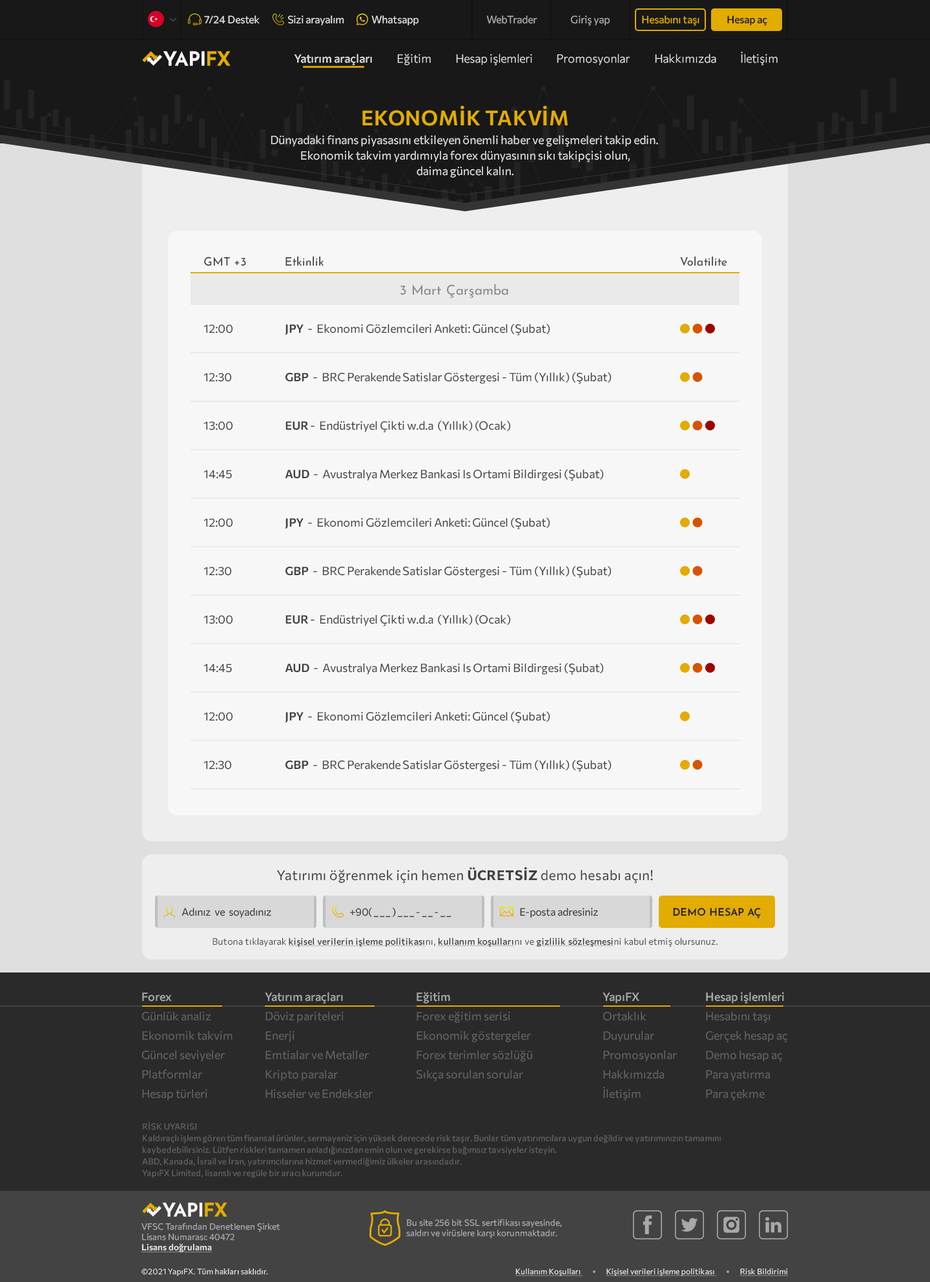
<style>
.page{position:relative;width:930px;height:1282px;background:#f7f7f7}
.page>*{position:absolute;margin:0}
.t1{font:10.3px "Commissioner-Regular";color:#dfdfdf}
.t2{font:10.3px "Commissioner-Regular";color:#a9a8a8}
.t3{font:10.3px "Commissioner-Regular";color:#e2ac00}
.t4{font:10.3px "Commissioner-Medium";color:#181818}
.t5{font:11.6px "Commissioner-Medium";color:#dfdfdf}
.t6{font:11.6px "Commissioner-Light";color:#dfdfdf}
.t7{font:20.7px "Commissioner-SemiBold";letter-spacing:0.025em;color:#e2ac00}
.t8{font:11.6px/15.5px "Commissioner-Regular";color:#dfdfdf}
.t9{font:11.6px "JosefinSans-Regular";color:#404040}
.t10{font:13.6px "JosefinSans-Regular";color:#8c8c8c}
.t11{font:11.6px "Commissioner-Regular";color:#404040}
.t12{font:11.6px "Commissioner-SemiBold";color:#404040}
.t13{font:13.6px "Commissioner-Regular";letter-spacing:0.025em;color:#404040}
.t14{font:13.6px "Commissioner-Bold";letter-spacing:0.025em;color:#404040}
.t15{font:10.3px "Commissioner-Regular";color:#404040}
.t16{font:10.3px "Commissioner-Regular";letter-spacing:0.2em;color:#404040}
.t17{font:10.3px "JosefinSans-SemiBold";color:#181818}
.t18{font:9px "Commissioner-Medium";letter-spacing:0.025em;color:#404040;text-decoration:underline}
.t19{font:9px "Commissioner-Light";letter-spacing:0.025em;color:#404040}
.t20{font:11.6px/19.4px "Commissioner-Regular";color:#626262}
.t21{font:11.6px/19.4px "Commissioner-Medium";color:#a9a8a8}
.t22{font:8.4px/11.6px "Commissioner-Regular";letter-spacing:0.025em;color:#626262}
.t23{font:8.7px "Commissioner-Regular";color:#a9a8a8}
.t24{font:8.7px "Commissioner-SemiBold";color:#dfdfdf;text-decoration:underline}
.t25{font:7.8px "Commissioner-Light";letter-spacing:0.025em;color:#dfdfdf}
.t26{font:7.8px "Commissioner-Regular";letter-spacing:0.025em;color:#dfdfdf;text-decoration:underline}
</style>
<div class="page">
<p class="t1" style="left:204px;top:16px;width:56px;height:8px">7/24 Destek</p>
<p class="t1" style="left:287px;top:16px;width:57px;height:10px">Sizi arayalım</p>
<p class="t1" style="left:371px;top:16px;width:48px;height:10px">Whatsapp</p>
<p class="t2" style="left:486px;top:16px;width:52px;height:8px">WebTrader</p>
<p class="t2" style="left:570px;top:16px;width:41px;height:10px">Giriş yap</p>
<p class="t3" style="left:642px;top:16px;width:58px;height:10px">Hesabını taşı</p>
<p class="t4" style="left:727px;top:16px;width:41px;height:10px">Hesap aç</p>
<p class="t5" style="left:294px;top:54px;width:78px;height:11px">Yatırım araçları</p>
<p class="t6" style="left:397px;top:54px;width:34px;height:11px">Eğitim</p>
<p class="t6" style="left:456px;top:54px;width:76px;height:11px">Hesap işlemleri</p>
<p class="t6" style="left:557px;top:54px;width:73px;height:11px">Promosyonlar</p>
<p class="t6" style="left:655px;top:54px;width:61px;height:9px">Hakkımızda</p>
<p class="t6" style="left:741px;top:52px;width:37px;height:13px">İletişim</p>
<p class="t7" style="left:362px;top:105px;width:206px;height:21px">EKONOMİK TAKVİM</p>
<p class="t8" style="left:271px;top:135px;width:387px;height:43px;text-align:center">Dünyadaki finans piyasasını etkileyen önemli haber ve gelişmeleri takip edin. <br>Ekonomik takvim yardımıyla forex dünyasının sıkı takipçisi olun,<br>daima güncel kalın.</p>
<p class="t9" style="left:204px;top:256px;width:42px;height:10px">GMT +3</p>
<p class="t9" style="left:286px;top:256px;width:38px;height:10px">Etkinlik</p>
<p class="t9" style="left:680px;top:256px;width:47px;height:10px">Volatilite</p>
<p class="t10" style="left:400px;top:284px;width:108px;height:14px">3 Mart Çarşamba</p>
<p class="t11" style="left:204px;top:324px;width:29px;height:9px">12:00</p>
<p class="t11" style="left:285px;top:324px;width:265px;height:11px"><span class="t12">JPY </span> -  Ekonomi Gözlemcileri Anketi: Güncel (Şubat)</p>
<p class="t11" style="left:204px;top:373px;width:28px;height:9px">12:30</p>
<p class="t11" style="left:286px;top:372px;width:326px;height:12px"><span class="t12">GBP </span> -  BRC Perakende Satislar Göstergesi - Tüm (Yıllık) (Şubat)</p>
<p class="t11" style="left:204px;top:421px;width:29px;height:9px">13:00</p>
<p class="t11" style="left:286px;top:421px;width:225px;height:11px"><span class="t12">EUR</span> -  Endüstriyel Çikti w.d.a  (Yıllık) (Ocak)</p>
<p class="t11" style="left:204px;top:470px;width:28px;height:9px">14:45</p>
<p class="t11" style="left:285px;top:469px;width:319px;height:12px"><span class="t12">AUD </span> -  Avustralya Merkez Bankasi Is Ortami Bildirgesi (Şubat)</p>
<p class="t11" style="left:204px;top:518px;width:29px;height:9px">12:00</p>
<p class="t11" style="left:285px;top:517px;width:265px;height:12px"><span class="t12">JPY </span> -  Ekonomi Gözlemcileri Anketi: Güncel (Şubat)</p>
<p class="t11" style="left:204px;top:567px;width:28px;height:9px">12:30</p>
<p class="t11" style="left:286px;top:566px;width:326px;height:12px"><span class="t12">GBP </span> -  BRC Perakende Satislar Göstergesi - Tüm (Yıllık) (Şubat)</p>
<p class="t11" style="left:204px;top:615px;width:29px;height:9px">13:00</p>
<p class="t11" style="left:286px;top:614px;width:225px;height:12px"><span class="t12">EUR</span> -  Endüstriyel Çikti w.d.a  (Yıllık) (Ocak)</p>
<p class="t11" style="left:204px;top:663px;width:28px;height:10px">14:45</p>
<p class="t11" style="left:285px;top:663px;width:319px;height:11px"><span class="t12">AUD </span> -  Avustralya Merkez Bankasi Is Ortami Bildirgesi (Şubat)</p>
<p class="t11" style="left:204px;top:712px;width:29px;height:9px">12:00</p>
<p class="t11" style="left:285px;top:711px;width:265px;height:12px"><span class="t12">JPY </span> -  Ekonomi Gözlemcileri Anketi: Güncel (Şubat)</p>
<p class="t11" style="left:204px;top:760px;width:28px;height:9px">12:30</p>
<p class="t11" style="left:286px;top:760px;width:326px;height:11px"><span class="t12">GBP </span> -  BRC Perakende Satislar Göstergesi - Tüm (Yıllık) (Şubat)</p>
<p class="t13" style="left:277px;top:867px;width:376px;height:16px">Yatırımı öğrenmek için hemen <span class="t14">ÜCRETSİZ</span> demo hesabı açın!</p>
<p class="t15" style="left:182px;top:908px;width:89px;height:10px">Adınız  ve  soyadınız</p>
<p class="t16" style="left:350px;top:907px;width:102px;height:10px"><span class="t15">+90</span>(___)___-__-__</p>
<p class="t15" style="left:520px;top:908px;width:78px;height:10px">E-posta adresiniz</p>
<p class="t17" style="left:673px;top:907px;width:88px;height:11px">DEMO HESAP AÇ</p>
<p class="t18" style="left:213px;top:937px;width:505px;height:10px"><span class="t19">Butona tıklayarak </span>kişisel verilerin işleme politikası<span class="t19">nı, </span>kullanım koşulları<span class="t19">nı ve </span>gizlilik sözleşmesi<span class="t19">ni kabul etmiş olursunuz.</span></p>
<p class="t20" style="left:141px;top:992px;width:92px;height:108px"><span class="t21">Forex<br></span>Günlük analiz<br>Ekonomik takvim<br>Güncel seviyeler<br>Platformlar<br>Hesap türleri</p>
<p class="t20" style="left:265px;top:992px;width:108px;height:106px"><span class="t21">Yatırım araçları<br></span>Döviz pariteleri<br>Enerji<br>Emtialar ve Metaller<br>Kripto paralar<br>Hisseler ve Endeksler</p>
<p class="t20" style="left:416px;top:992px;width:116px;height:89px"><span class="t21">Eğitim<br></span>Forex eğitim serisi<br>Ekonomik göstergeler<br>Forex terimler sözlüğü<br>Sıkça sorulan sorular</p>
<p class="t20" style="left:603px;top:992px;width:74px;height:108px"><span class="t21">YapıFX<br></span>Ortaklık<br>Duyurular<br>Promosyonlar<br>Hakkımızda<br>İletişim</p>
<p class="t20" style="left:705px;top:992px;width:83px;height:108px"><span class="t21">Hesap işlemleri<br></span>Hesabını taşı<br>Gerçek hesap aç<br>Demo hesap aç<br>Para yatırma<br>Para çekme</p>
<p class="t22" style="left:142px;top:1121px;width:579px;height:57px">RİSK UYARISI<br>Kaldıraçlı işlem gören tüm finansal ürünler, sermayeniz için yüksek derecede risk taşır. Bunlar tüm yatırımcılara uygun değildir ve yatırımınızın tamamını kaybedebilirsiniz. Lütfen riskleri tamamen anladığınızdan emin olun ve gerekirse bağımsız tavsiyeler isteyin.<br>ABD, Kanada, İsrail ve İran, yatırımcılarına hizmet vermediğimiz ülkeler arasındadır.<br>YapıFX Limited, lisanslı ve regüle bir aracı kurumdur.</p>
<p class="t23" style="left:141px;top:1222px;width:139px;height:30px">VFSC Tarafından Denetlenen Şirket<br>Lisans Numarası: 40472<br><span class="t24">Lisans doğrulama</span></p>
<p class="t23" style="left:406px;top:1218px;width:156px;height:20px">Bu site 256 bit SSL sertifikası sayesinde,<br>saldırı ve virüslere karşı korunmaktadır.</p>
<p class="t25" style="left:141px;top:1268px;width:127px;height:8px">©2021 YapıFX. Tüm hakları saklıdır.</p>
<p class="t26" style="left:516px;top:1268px;width:272px;height:8px">Kullanım Koşulları                 Kişisel verileri işleme politikası                 Risk Bildirimi</p>
</div>
